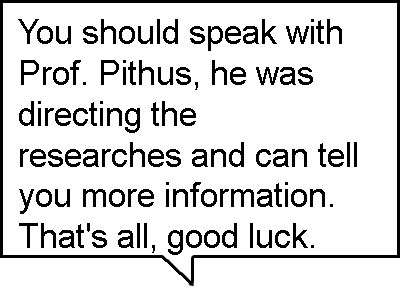
<style>
.page{position:relative;width:400px;height:300px;background:#ffffff}
.page>*{position:absolute;margin:0}
.t1{font:34px "ArialMT";color:#000000}
</style>
<div class="page">
<p class="t1" style="left:18px;top:19px;width:339px;height:236px">You should speak with <br>Prof. Pithus, he was <br>directing the <br>researches and can tell<br>you more information.<br>That's all, good luck.</p>
</div>
